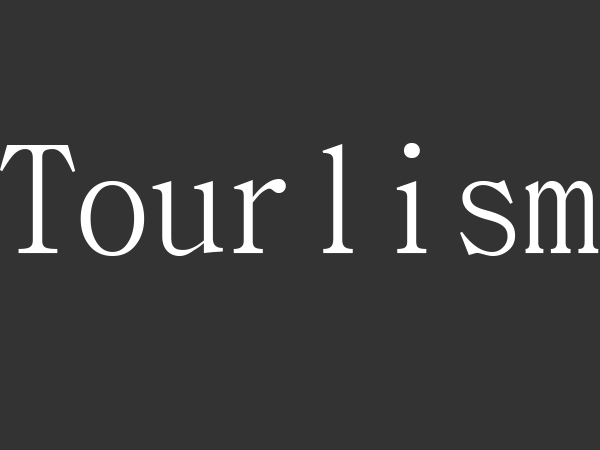
<style>
.page{position:relative;width:600px;height:450px;background:#333333}
.page>*{position:absolute;margin:0}
.t1{font:150px "BatangChe";color:#ffffff}
.t2{font:100px "Gulim";color:#ffffff}
</style>
<div class="page">
<p class="t1" style="left:0px;top:143px;width:599px;height:113px"><span class="t2"><br></span>Tourlism</p>
</div>
